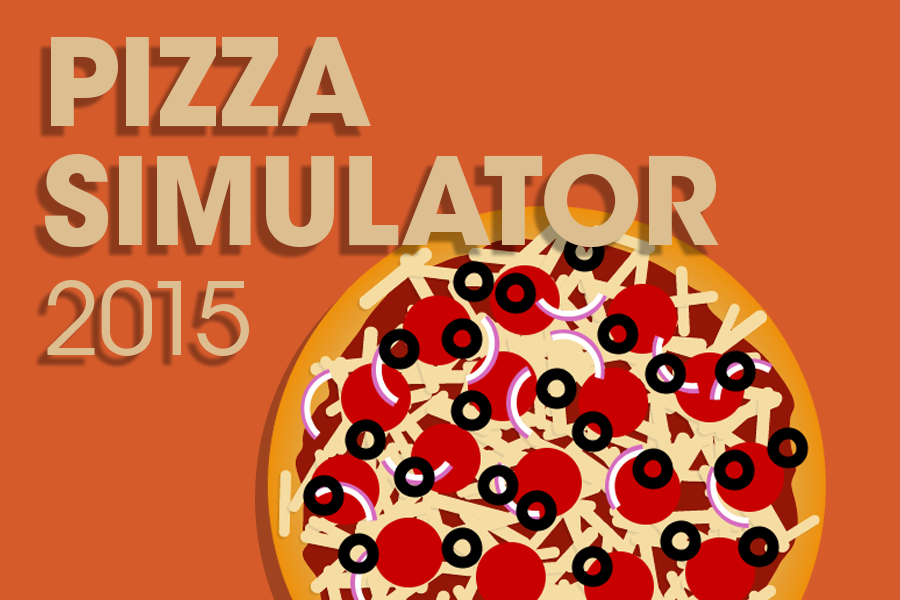
<style>
.page{position:relative;width:900px;height:600px;background:#d65b2b}
.page>*{position:absolute;margin:0}
.t1{font:120px "ITCAvantGardeStd-Bold";color:#ddbe90}
.t2{font:100px/110px "ITCAvantGardeStd-Bk";color:#ddbe90}
</style>
<div class="page">
<p class="t1" style="left:51px;top:36px;width:320px;height:91px">PIZZA</p>
<p class="t1" style="left:45px;top:153px;width:674px;height:203px">SIMULATOR<br><span class="t2">2015</span></p>
</div>
